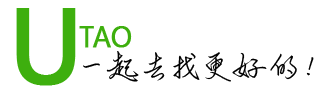
<style>
.page{position:relative;width:321px;height:87px;background:#ffffff}
.page>*{position:absolute;margin:0}
.t1{font:102.4px "Verdana";color:#3eaf0e;font-variant:small-caps;font-weight:bold}
.t2{font:40.9px "KhmerUI";color:#3eaf0e;font-variant:small-caps;font-weight:bold}
.t3{font:35.8px "»X??³ß®bÊ^P";letter-spacing:0.1em;color:#000000;font-variant:small-caps}
.t4{font:35.8px "»X??³ß®bÊ^P";letter-spacing:0.1em;color:#000000;font-variant:small-caps;font-style:italic}
</style>
<div class="page">
<p class="t1" style="left:16px;top:8px;width:60px;height:78px">U</p>
<p class="t2" style="left:79px;top:26px;width:53px;height:22px">tao</p>
<p class="t3" style="left:83px;top:51px;width:231px;height:31px">一起去找更好的<span class="t4">！</span></p>
</div>
